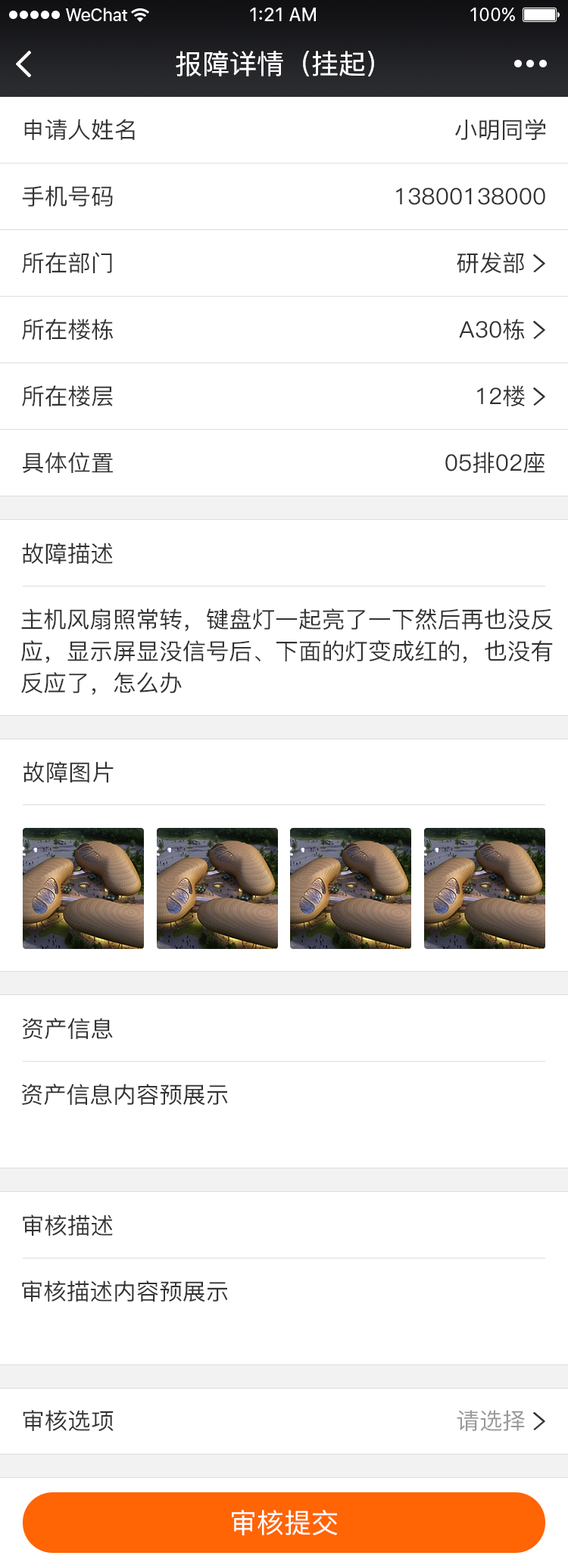
<style>
.page{position:relative;width:568px;height:1568px;background:#ffffff}
.page>*{position:absolute;margin:0}
.t1{font:27.2px "PingFang-SC-Medium";color:#ffffff}
.t2{font:22.7px "PingFang-SC-Medium";color:#333333}
.t3{font:22.7px/31.8px "PingFang-SC-Medium";color:#333333}
.t4{font:22.6px "PingFang-SC-Medium";color:#333333}
.t5{font:22.7px "PingFang-SC-Medium";color:#999999}
</style>
<div class="page">
<p class="t1" style="left:176px;top:51px;width:198px;height:25px">报障详情（挂起）</p>
<p class="t2" style="left:24px;top:119px;width:111px;height:21px">申请人姓名</p>
<p class="t2" style="left:455px;top:119px;width:91px;height:21px">小明同学</p>
<p class="t2" style="left:22px;top:185px;width:91px;height:22px">手机号码</p>
<p class="t2" style="left:396px;top:188px;width:149px;height:17px">13800138000</p>
<p class="t2" style="left:22px;top:252px;width:90px;height:21px">所在部门</p>
<p class="t2" style="left:456px;top:252px;width:68px;height:21px">研发部</p>
<p class="t2" style="left:22px;top:319px;width:92px;height:21px">所在楼栋</p>
<p class="t2" style="left:459px;top:319px;width:65px;height:21px">A30栋</p>
<p class="t2" style="left:22px;top:385px;width:91px;height:21px">所在楼层</p>
<p class="t2" style="left:477px;top:385px;width:47px;height:21px">12楼</p>
<p class="t2" style="left:23px;top:452px;width:90px;height:21px">具体位置</p>
<p class="t2" style="left:445px;top:452px;width:99px;height:21px">05排02座</p>
<p class="t2" style="left:22px;top:543px;width:91px;height:21px">故障描述</p>
<p class="t3" style="left:21px;top:608px;width:531px;height:87px">主机风扇照常转，键盘灯一起亮了一下然后再也没反<br>应，显示屏显没信号后、下面的灯变成红的，也没有<br>反应了，怎么办</p>
<p class="t4" style="left:23px;top:761px;width:91px;height:21px">故障图片</p>
<p class="t2" style="left:23px;top:1018px;width:90px;height:21px">资产信息</p>
<p class="t2" style="left:22px;top:1084px;width:206px;height:22px">资产信息内容预展示</p>
<p class="t2" style="left:23px;top:1215px;width:90px;height:21px">审核描述</p>
<p class="t2" style="left:22px;top:1280px;width:206px;height:22px">审核描述内容预展示</p>
<p class="t2" style="left:23px;top:1410px;width:91px;height:22px">审核选项</p>
<p class="t5" style="left:456px;top:1410px;width:68px;height:21px">请选择</p>
<p class="t1" style="left:232px;top:1510px;width:106px;height:25px">审核提交</p>
</div>
